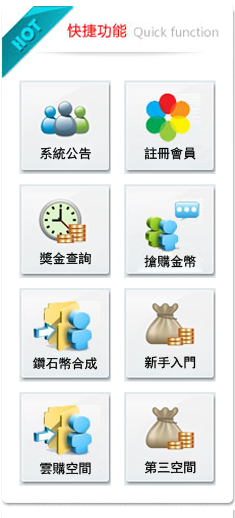
<style>
.page{position:relative;width:235px;height:518px;background:#ffffff}
.page>*{position:absolute;margin:0}
.t1{font:13px "SimHei";color:#000000}
</style>
<div class="page">
<p class="t1" style="left:40px;top:147px;width:51px;height:13px">系統公告</p>
<p class="t1" style="left:144px;top:147px;width:52px;height:13px">註冊會員</p>
<p class="t1" style="left:39px;top:252px;width:52px;height:13px">獎金查詢</p>
<p class="t1" style="left:144px;top:255px;width:52px;height:13px">搶購金幣</p>
<p class="t1" style="left:32px;top:357px;width:66px;height:13px">鑽石幣合成</p>
<p class="t1" style="left:144px;top:356px;width:52px;height:13px">新手入門</p>
<p class="t1" style="left:40px;top:462px;width:51px;height:13px">雲購空間</p>
<p class="t1" style="left:144px;top:461px;width:52px;height:13px">第三空間</p>
</div>
